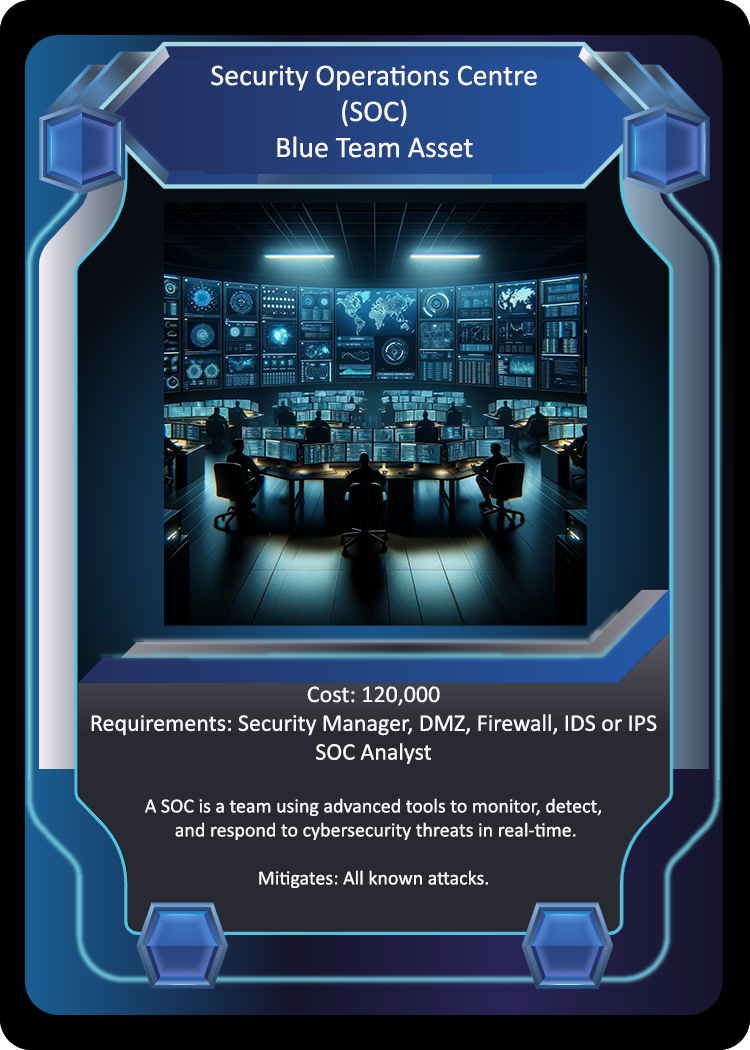
<style>
.page{position:relative;width:750px;height:1050px}
.page>*{position:absolute;margin:0}
.t1{font:30px "Calibri";color:#fcfbfb}
.t2{font:20px "Calibri";color:#fcfbfb}
.t3{font:24px "Calibri";color:#fcfbfb}
</style>
<div class="page">
<p class="t1" style="left:211px;top:65px;width:326px;height:93px;text-align:center">Security Operations Centre<br>(SOC)<br>Blue Team Asset</p>
<p class="t2" style="left:91px;top:686px;width:566px;height:202px;text-align:center"><span class="t3">Cost: 120,000<br>Requirements: Security Manager, DMZ, Firewall, IDS or IPS<br>SOC Analyst<br><br></span>A SOC is a team using advanced tools to monitor, detect,<br> and respond to cybersecurity threats in real-time.<br><br>Mitigates: All known attacks.</p>
</div>
